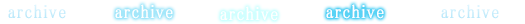
<style>
.page{position:relative;width:525px;height:24px;background:#ffffff}
.page>*{position:absolute;margin:0}
.t1{font:19px "MS-PMincho";letter-spacing:0.08em;color:#b8e7fa;font-weight:bold;scale:0.84 1}
.t2{font:19px "MS-PMincho";letter-spacing:0.08em;color:#ffffff;font-weight:bold;scale:0.84 1}
</style>
<div class="page">
<p class="t1" style="left:8px;top:4px;width:58px;height:15px">archive</p>
<p class="t2" style="left:115px;top:4px;width:58px;height:15px">archive</p>
<p class="t2" style="left:220px;top:6px;width:58px;height:15px">archive</p>
<p class="t2" style="left:326px;top:4px;width:58px;height:15px">archive</p>
<p class="t1" style="left:441px;top:4px;width:58px;height:15px">archive</p>
</div>
